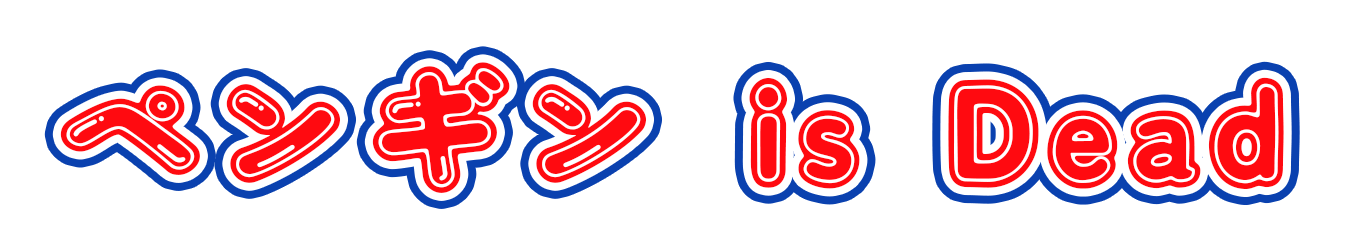
<style>
.page{position:relative;width:1345px;height:248px;background:#ffffff}
.page>*{position:absolute;margin:0}
.t1{font:150px "DokiDokiFantasia";letter-spacing:0.02em;color:#ff0a10}
</style>
<div class="page">
<p class="t1" style="left:60px;top:62px;width:1224px;height:131px">ペンギン is Dead</p>
</div>
